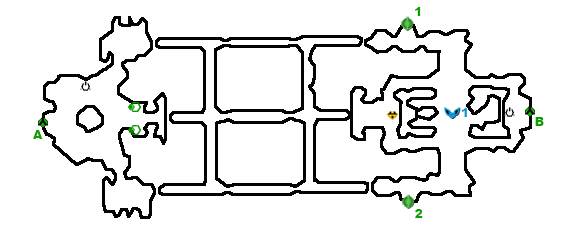
<style>
.page{position:relative;width:569px;height:250px;background:#ffffff}
.page>*{position:absolute;margin:0}
.t1{font:12px "Arial-Black";color:#0d9e01}
.t2{font:12px "Arial-Black";color:#0692d2}
</style>
<div class="page">
<p class="t1" style="left:415px;top:7px;width:6px;height:9px">1</p>
<p class="t2" style="left:462px;top:108px;width:5px;height:9px">1</p>
<p class="t1" style="left:535px;top:117px;width:9px;height:9px">B</p>
<p class="t1" style="left:33px;top:130px;width:10px;height:9px">A</p>
<p class="t1" style="left:415px;top:209px;width:8px;height:9px">2</p>
</div>
